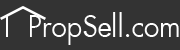
<style>
.page{position:relative;width:180px;height:50px;background:#333333}
.page>*{position:absolute;margin:0}
.t1{font:27.7px "Futura";color:#ffffff}
</style>
<div class="page">
<p class="t1" style="left:30px;top:12px;width:149px;height:33px">PropSell.com</p>
</div>
